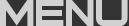
<style>
.page{position:relative;width:129px;height:26px;background:#d1d1d1}
.page>*{position:absolute;margin:0}
.t1{font:50px "Bitsumishi";color:#d1d1d1}
</style>
<div class="page">
<p class="t1" style="left:0px;top:0px;width:128px;height:26px">menu</p>
</div>
